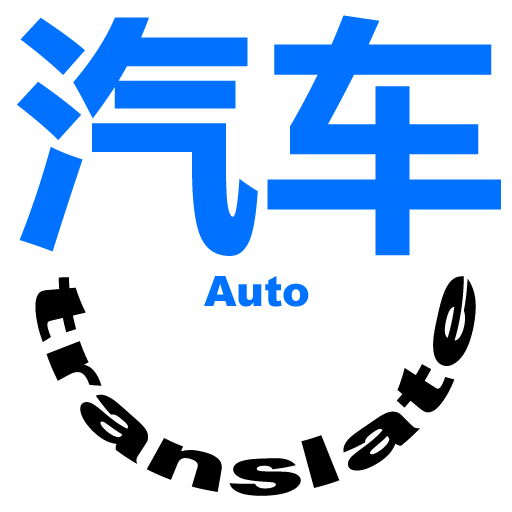
<style>
.page{position:relative;width:512px;height:512px;background:#ffffff}
.page>*{position:absolute;margin:0}
.t1{font:246.5px "MicrosoftYaHeiUI-Bold";color:#0072ff}
.t2{font:66.7px/41.7px "Arial-Black";color:#000000}
.t3{font:41.7px "Arial-Black";color:#0072ff}
</style>
<div class="page">
<p class="t1" style="left:17px;top:15px;width:484px;height:241px">汽车</p>
<p class="t2" style="left:35px;top:276px;width:441px;height:220px">translate</p>
<p class="t3" style="left:204px;top:276px;width:105px;height:31px">Auto</p>
</div>
